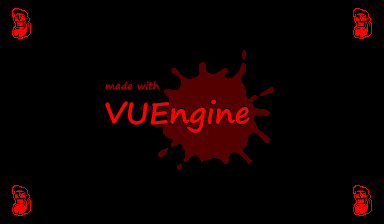
<style>
.page{position:relative;width:384px;height:224px;background:#000000}
.page>*{position:absolute;margin:0}
.t1{font:10px "SegoePrint-Bold";color:#aa0000}
.t2{font:30px "SegoePrint-Bold";color:#ff0000}
</style>
<div class="page">
<p class="t1" style="left:105px;top:81px;width:54px;height:9px">made with</p>
<p class="t2" style="left:105px;top:99px;width:145px;height:34px">VUEngine</p>
</div>
